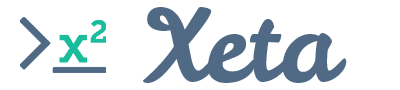
<style>
.page{position:relative;width:400px;height:90px;background:#ffffff}
.page>*{position:absolute;margin:0}
.t1{font:100px "LeckerliOne";color:#506a85}
</style>
<div class="page">
<p class="t1" style="left:143px;top:7px;width:204px;height:76px">Xeta</p>
</div>
